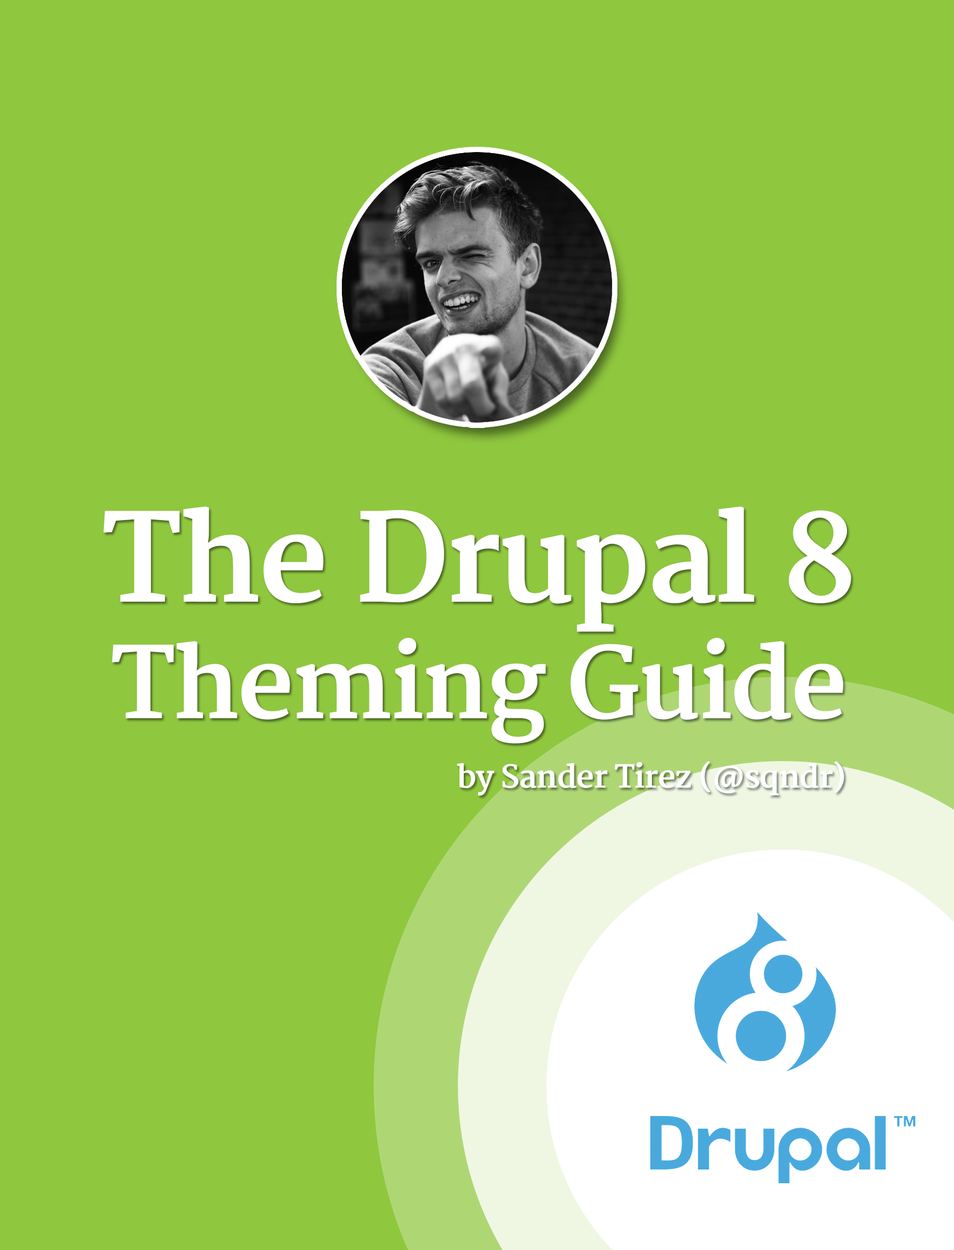
<style>
.page{position:relative;width:954px;height:1250px;background:#8fc73e}
.page>*{position:absolute;margin:0}
.t1{font:97px "Merriweather-Bold";letter-spacing:-0.025em;color:#ffffff}
.t2{font:119.9px "Merriweather-Bold";letter-spacing:-0.025em;color:#ffffff}
.t3{font:30.9px "Merriweather-Bold";letter-spacing:-0.025em;color:#ffffff}
</style>
<div class="page">
<p class="t1" style="left:103px;top:507px;width:748px;height:237px;text-align:center"><span class="t2">The Drupal 8<br></span>Theming Guide</p>
<p class="t3" style="left:457px;top:761px;width:387px;height:35px">by Sander Tirez (@sqndr)</p>
</div>
